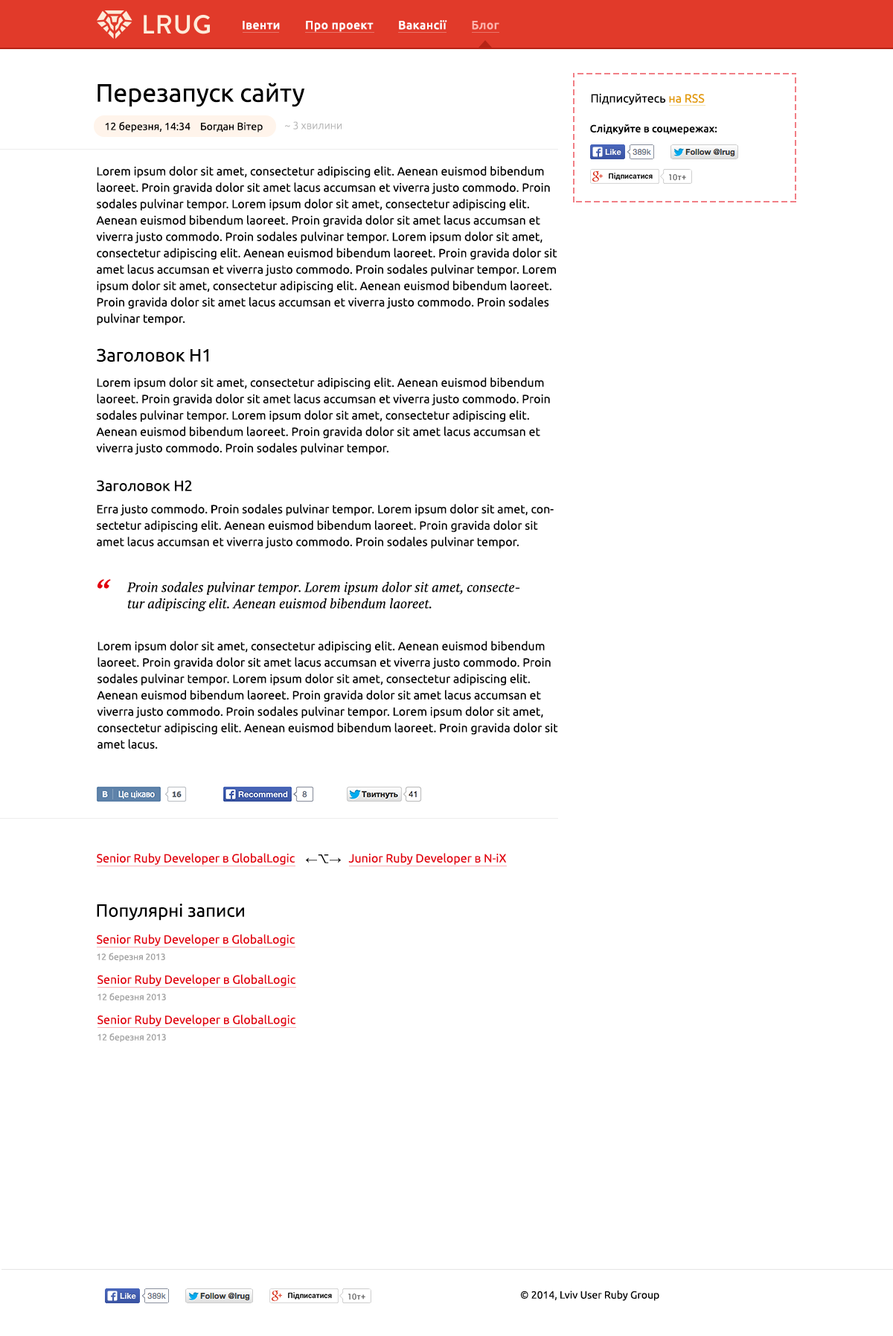
<style>
.page{position:relative;width:893px;height:1336px;background:#ffffff}
.page>*{position:absolute;margin:0}
.t1{font:11.9px "Ubuntu-Medium";letter-spacing:0.034em;color:#ffffff}
.t2{font:11.9px "Ubuntu-Medium";letter-spacing:0.034em;color:#ffb4ad}
.t3{font:25.3px "Ubuntu";color:#000000}
.t4{font:11.9px "Ubuntu";color:#000000}
.t5{font:11.9px "Ubuntu";color:#e39b00}
.t6{font:10.4px "Ubuntu";color:#000000}
.t7{font:10.4px "Ubuntu-Light";color:#b8b8b8}
.t8{font:10.4px "Ubuntu-Medium";color:#000000}
.t9{font:11.9px/16.4px "Ubuntu";color:#000000}
.t10{font:17.9px/16.4px "Ubuntu";color:#000000}
.t11{font:14.9px/16.4px "Ubuntu";color:#000000}
.t12{font:35.7px "PTSerif-Italic";color:#e3000e}
.t13{font:13.4px/16.4px "PTSerif-Italic";color:#000000}
.t14{font:11.9px "Ubuntu";color:#e3000e}
.t15{font:11.9px "ArialMT";color:#000000}
.t16{font:11.9px "LucidaGrande";color:#000000}
.t17{font:17.9px "Ubuntu";color:#000000}
.t18{font:8.9px "Ubuntu";color:#a3a3a3}
</style>
<div class="page">
<p class="t1" style="left:243px;top:20px;width:256px;height:12px">Івенти        Про проект        Вакансії        <span class="t2">Блог</span></p>
<p class="t3" style="left:97px;top:83px;width:207px;height:24px">Перезапуск сайту</p>
<p class="t4" style="left:591px;top:93px;width:114px;height:12px">Підписуйтесь <span class="t5">на RSS</span></p>
<p class="t6" style="left:105px;top:121px;width:158px;height:11px">12 березня, 14:34    Богдан Вітер</p>
<p class="t7" style="left:285px;top:121px;width:57px;height:8px">~ 3 хвилини</p>
<p class="t8" style="left:590px;top:124px;width:127px;height:11px">Слідкуйте в соцмережах:</p>
<p class="t9" style="left:96px;top:166px;width:461px;height:382px">Lorem ipsum dolor sit amet, consectetur adipiscing elit. Aenean euismod bibendum laoreet. Proin gravida dolor sit amet lacus accumsan et viverra justo commodo. Proin sodales pulvinar tempor. Lorem ipsum dolor sit amet, consectetur adipiscing elit. Aenean euismod bibendum laoreet. Proin gravida dolor sit amet lacus accumsan et viverra justo commodo. Proin sodales pulvinar tempor. Lorem ipsum dolor sit amet, consectetur adipiscing elit. Aenean euismod bibendum laoreet. Proin gravida dolor sit amet lacus accumsan et viverra justo commodo. Proin sodales pulvinar tempor. Lorem ipsum dolor sit amet, consectetur adipiscing elit. Aenean euismod bibendum laoreet. Proin gravida dolor sit amet lacus accumsan et viverra justo commodo. Proin sodales pulvinar tempor. <br><br><span class="t10">Заголовок H1<br><br></span>Lorem ipsum dolor sit amet, consectetur adipiscing elit. Aenean euismod bibendum laoreet. Proin gravida dolor sit amet lacus accumsan et viverra justo commodo. Proin sodales pulvinar tempor. Lorem ipsum dolor sit amet, consectetur adipiscing elit. Aenean euismod bibendum laoreet. Proin gravida dolor sit amet lacus accumsan et viverra justo commodo. Proin sodales pulvinar tempor.<br><br><span class="t11">Заголовок H2<br><br></span>Erra justo commodo. Proin sodales pulvinar tempor. Lorem ipsum dolor sit amet, consectetur adipiscing elit. Aenean euismod bibendum laoreet. Proin gravida dolor sit amet lacus accumsan et viverra justo commodo. Proin sodales pulvinar tempor.</p>
<p class="t12" style="left:97px;top:579px;width:14px;height:10px">“</p>
<p class="t13" style="left:126px;top:581px;width:394px;height:31px">Proin sodales pulvinar tempor. Lorem ipsum dolor sit amet, consectetur adipiscing elit. Aenean euismod bibendum laoreet.</p>
<p class="t9" style="left:97px;top:641px;width:461px;height:108px">Lorem ipsum dolor sit amet, consectetur adipiscing elit. Aenean euismod bibendum laoreet. Proin gravida dolor sit amet lacus accumsan et viverra justo commodo. Proin sodales pulvinar tempor. Lorem ipsum dolor sit amet, consectetur adipiscing elit. Aenean euismod bibendum laoreet. Proin gravida dolor sit amet lacus accumsan et viverra justo commodo. Proin sodales pulvinar tempor. Lorem ipsum dolor sit amet, consectetur adipiscing elit. Aenean euismod bibendum laoreet. Proin gravida dolor sit amet lacus.</p>
<p class="t14" style="left:97px;top:853px;width:198px;height:12px">Senior Ruby Developer в GlobalLogic</p>
<p class="t15" style="left:306px;top:854px;width:35px;height:9px">←<span class="t16">⌥</span>→</p>
<p class="t14" style="left:348px;top:853px;width:159px;height:12px">Junior Ruby Developer в N-iX</p>
<p class="t17" style="left:97px;top:903px;width:147px;height:17px">Популярні записи</p>
<p class="t14" style="left:97px;top:934px;width:198px;height:12px">Senior Ruby Developer в GlobalLogic</p>
<p class="t18" style="left:97px;top:952px;width:68px;height:9px">12 березня 2013</p>
<p class="t14" style="left:97px;top:974px;width:198px;height:12px">Senior Ruby Developer в GlobalLogic</p>
<p class="t18" style="left:97px;top:993px;width:69px;height:8px">12 березня 2013</p>
<p class="t14" style="left:97px;top:1014px;width:198px;height:12px">Senior Ruby Developer в GlobalLogic</p>
<p class="t18" style="left:97px;top:1033px;width:69px;height:9px">12 березня 2013</p>
<p class="t6" style="left:520px;top:1289px;width:139px;height:12px">© 2014, Lviv User Ruby Group</p>
</div>
